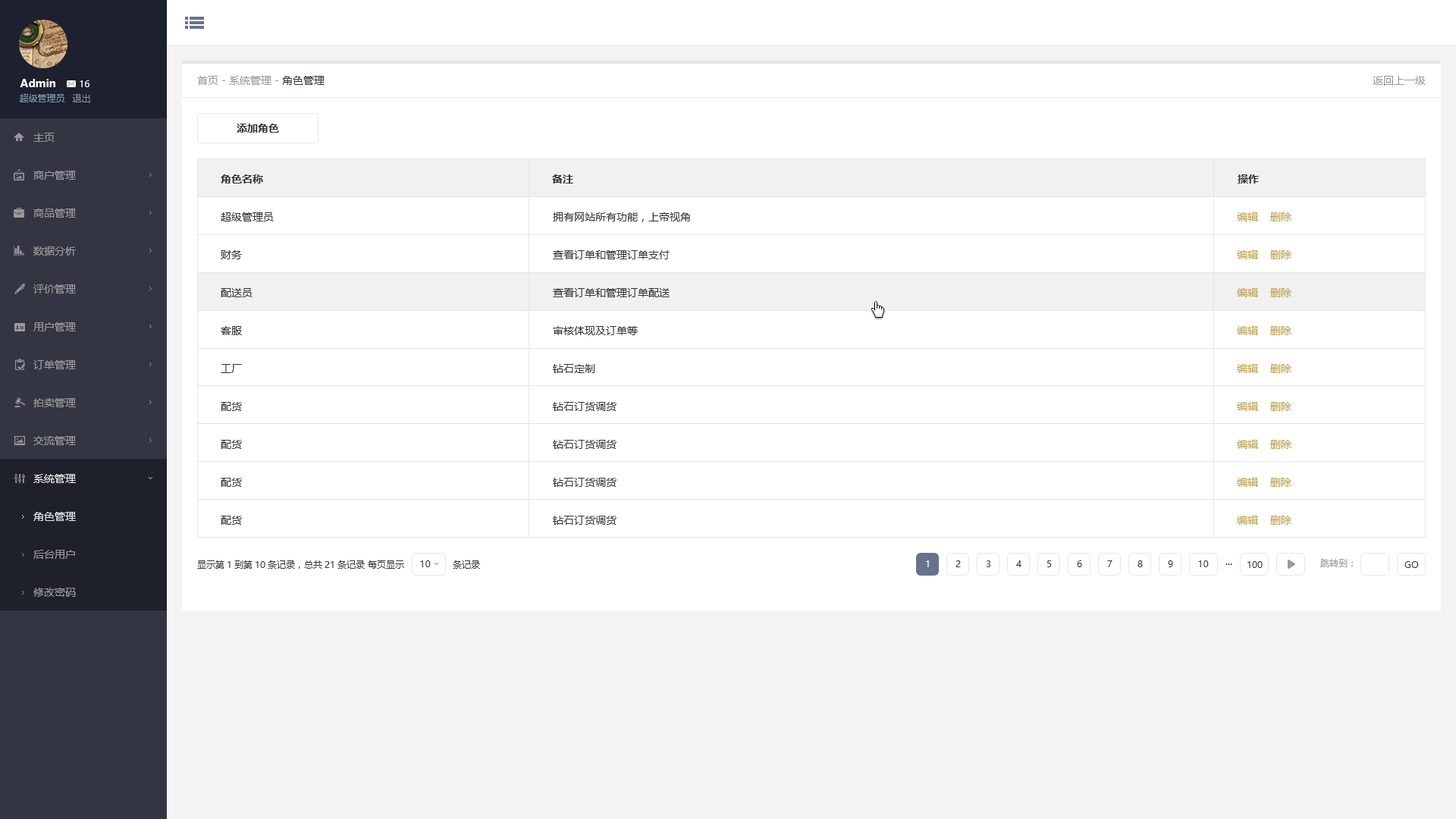
<style>
.page{position:relative;width:1456px;height:819px;background:#ffffff}
.page>*{position:absolute;margin:0}
.t1{font:10.6px "MicrosoftYaHei";color:#999999}
.t2{font:10.6px "MicrosoftYaHei";color:#333642}
.t3{font:10.6px "MicrosoftYaHei-Bold";color:#ffffff}
.t4{font:9.1px "MicrosoftYaHei";color:#ffffff}
.t5{font:9.1px "MicrosoftYaHei";color:#8095a8}
.t6{font:10.6px "MicrosoftYaHei-Bold";color:#333333}
.t7{font:10.6px/37.9px "MicrosoftYaHei";color:#999999}
.t8{font:10.6px/37.9px "MicrosoftYaHei";color:#e5e5e5}
.t9{font:10.6px/37.9px "MicrosoftYaHei";color:#333333}
.t10{font:10.6px/37.9px "MicrosoftYaHei";color:#bda34a}
.t11{font:10.6px/37.9px "MicrosoftYaHei";color:#e6e6e6}
.t12{font:9.1px "MicrosoftYaHei";color:#333333}
.t13{font:9.1px "MicrosoftYaHei";color:#999999}
</style>
<div class="page">
<p class="t1" style="left:197px;top:76px;width:128px;height:9px">首页 - 系统管理 - <span class="t2">角色管理</span></p>
<p class="t1" style="left:1373px;top:76px;width:53px;height:10px">返回上一级</p>
<p class="t3" style="left:20px;top:79px;width:35px;height:8px">Admin</p>
<p class="t4" style="left:80px;top:80px;width:9px;height:7px">16</p>
<p class="t5" style="left:20px;top:94px;width:45px;height:8px">超级管理员</p>
<p class="t5" style="left:72px;top:94px;width:18px;height:9px">退出</p>
<p class="t6" style="left:237px;top:124px;width:42px;height:9px">添加角色</p>
<p class="t7" style="left:33px;top:133px;width:43px;height:350px">主页<br>商户管理<br>商品管理<br>数据分析<br>评价管理<br>用户管理<br>订单管理<br>拍卖管理<br>交流管理<br><span class="t8">系统管理</span></p>
<p class="t6" style="left:221px;top:174px;width:42px;height:10px">角色名称</p>
<p class="t6" style="left:552px;top:174px;width:21px;height:10px">备注</p>
<p class="t6" style="left:1238px;top:174px;width:21px;height:10px">操作</p>
<p class="t9" style="left:221px;top:212px;width:53px;height:313px">超级管理员<br>财务<br>配送员<br>客服<br>工厂<br>配货<br>配货<br>配货<br>配货</p>
<p class="t9" style="left:553px;top:212px;width:137px;height:313px">拥有网站所有功能，上帝视角<br>查看订单和管理订单支付<br>查看订单和管理订单配送<br>审核体现及订单等<br>钻石定制<br>钻石订货调货<br>钻石订货调货<br>钻石订货调货<br>钻石订货调货</p>
<p class="t10" style="left:1237px;top:212px;width:54px;height:313px">编辑    删除<br>编辑    删除<br>编辑    删除<br>编辑    删除<br>编辑    删除<br>编辑    删除<br>编辑    删除<br>编辑    删除<br>编辑    删除</p>
<p class="t7" style="left:33px;top:512px;width:43px;height:85px"><span class="t11">角色管理<br></span>后台用户<br>修改密码</p>
<p class="t12" style="left:197px;top:560px;width:283px;height:9px">显示第1到第10条记录，总共21条记录 每页显示                条记录</p>
<p class="t12" style="left:420px;top:560px;width:11px;height:7px">10</p>
<p class="t4" style="left:926px;top:560px;width:3px;height:7px">1</p>
<p class="t12" style="left:955px;top:560px;width:6px;height:7px">2</p>
<p class="t12" style="left:986px;top:560px;width:5px;height:7px">3</p>
<p class="t12" style="left:1016px;top:560px;width:5px;height:7px">4</p>
<p class="t12" style="left:1047px;top:560px;width:5px;height:7px">5</p>
<p class="t12" style="left:1077px;top:560px;width:5px;height:7px">6</p>
<p class="t12" style="left:1107px;top:560px;width:5px;height:7px">7</p>
<p class="t12" style="left:1137px;top:560px;width:6px;height:7px">8</p>
<p class="t12" style="left:1168px;top:560px;width:5px;height:7px">9</p>
<p class="t12" style="left:1198px;top:560px;width:11px;height:7px">10</p>
<p class="t12" style="left:1225px;top:563px;width:7px;height:2px">...</p>
<p class="t12" style="left:1247px;top:561px;width:16px;height:7px">100</p>
<p class="t13" style="left:1320px;top:559px;width:33px;height:8px">跳转到：</p>
<p class="t12" style="left:1404px;top:561px;width:15px;height:7px">GO</p>
</div>
